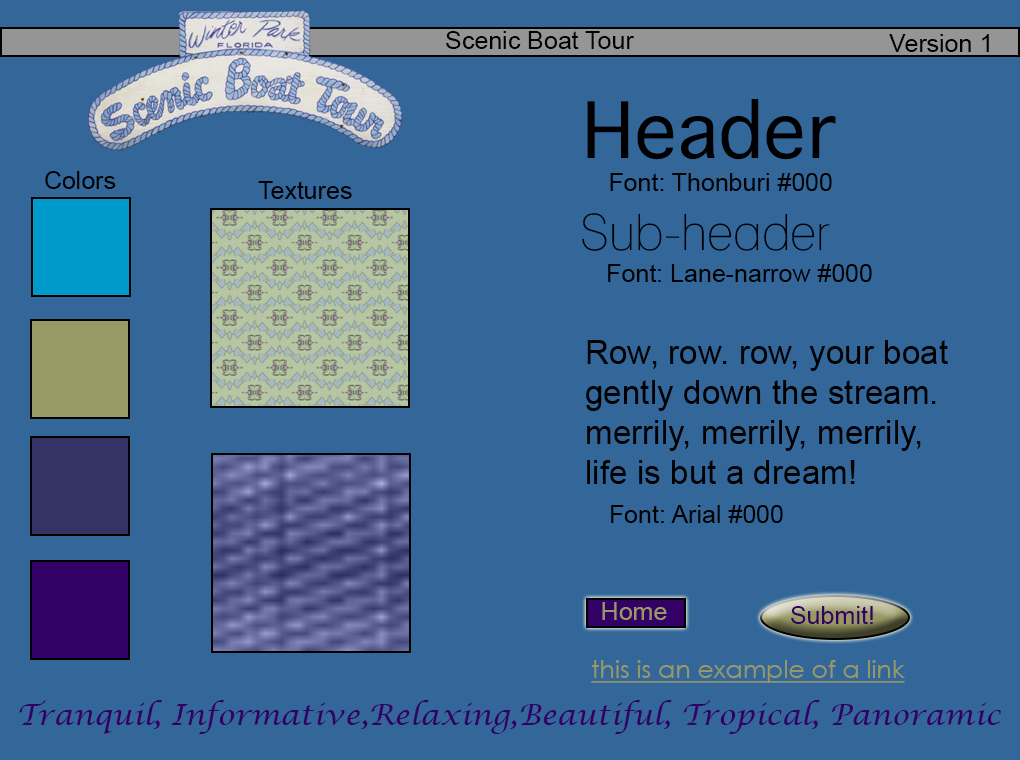
<style>
.page{position:relative;width:1020px;height:760px;background:#336699}
.page>*{position:absolute;margin:0}
.t1{font:25px "ArialMT";color:#000000}
.t2{font:75px "Thonburi";color:#000000}
.t3{font:50px "Lane-Narrow";color:#000000}
.t4{font:33.3px "ArialMT";color:#000000}
.t5{font:25px "ArialMT";color:#999966}
.t6{font:25px "ArialMT";color:#330066}
.t7{font:25px "CenturyGothic";color:#999966;text-decoration:underline}
.t8{font:29.2px "LucidaCalligraphy-Italic";color:#330066}
</style>
<div class="page">
<p class="t1" style="left:446px;top:31px;width:188px;height:18px">Scenic Boat Tour</p>
<p class="t1" style="left:889px;top:34px;width:100px;height:18px">Version 1</p>
<p class="t2" style="left:587px;top:99px;width:249px;height:61px">Header</p>
<p class="t1" style="left:45px;top:171px;width:71px;height:18px">Colors</p>
<p class="t1" style="left:610px;top:173px;width:222px;height:18px">Font: Thonburi #000</p>
<p class="t1" style="left:258px;top:181px;width:94px;height:18px">Textures</p>
<p class="t3" style="left:582px;top:213px;width:248px;height:38px">Sub-header</p>
<p class="t1" style="left:608px;top:264px;width:264px;height:18px">Font: Lane-narrow #000</p>
<p class="t4" style="left:586px;top:340px;width:362px;height:144px">Row, row. row, your boat<br>gently down the stream.<br>merrily, merrily, merrily,<br>life is but a dream!</p>
<p class="t1" style="left:611px;top:505px;width:172px;height:18px">Font: Arial #000</p>
<p class="t5" style="left:602px;top:602px;width:65px;height:18px">Home</p>
<p class="t6" style="left:791px;top:606px;width:82px;height:18px">Submit!</p>
<p class="t7" style="left:591px;top:660px;width:314px;height:23px">this is an example of a link</p>
<p class="t8" style="left:19px;top:700px;width:982px;height:34px">Tranquil, Informative,Relaxing,Beautiful, Tropical, Panoramic</p>
</div>
